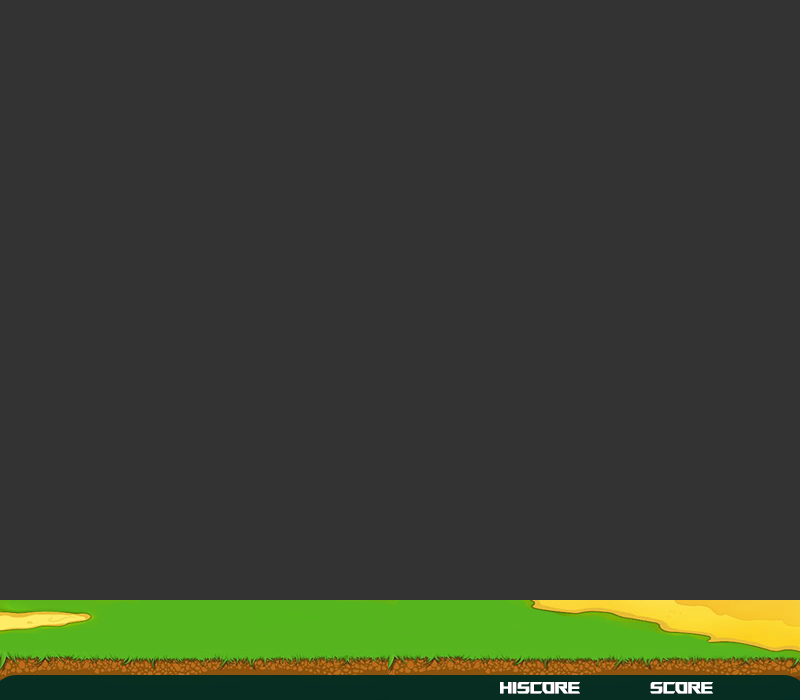
<style>
.page{position:relative;width:800px;height:700px;background:#333333}
.page>*{position:absolute;margin:0}
.t1{font:15.5px "ROGFonts-Regular";color:#ffffff;font-weight:bold;scale:0.9 1}
</style>
<div class="page">
<p class="t1" style="left:500px;top:682px;width:80px;height:12px">Hiscore</p>
<p class="t1" style="left:650px;top:682px;width:63px;height:12px">Score</p>
</div>
